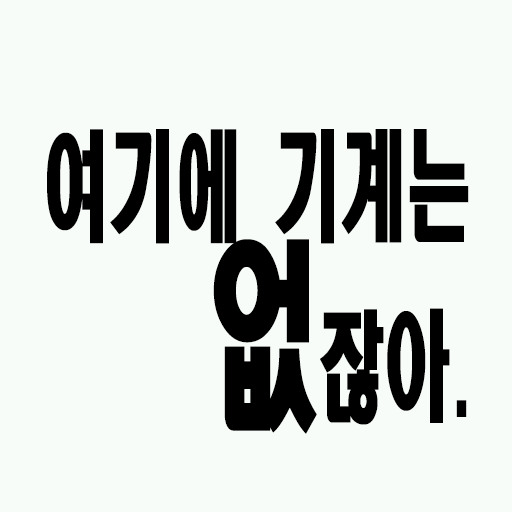
<style>
.page{position:relative;width:512px;height:512px;background:#f8fcf8}
.page>*{position:absolute;margin:0}
.t1{font:118.8px/140px "HeadlineR-HM";color:#000000;scale:0.56 1}
.t2{font:201.6px/140px "HeadlineR-HM";color:#000000;scale:0.56 1}
</style>
<div class="page">
<p class="t1" style="left:47px;top:129px;width:422px;height:305px;text-align:right">여기에 기계는<br><span class="t2">없</span>잖아.</p>
</div>
